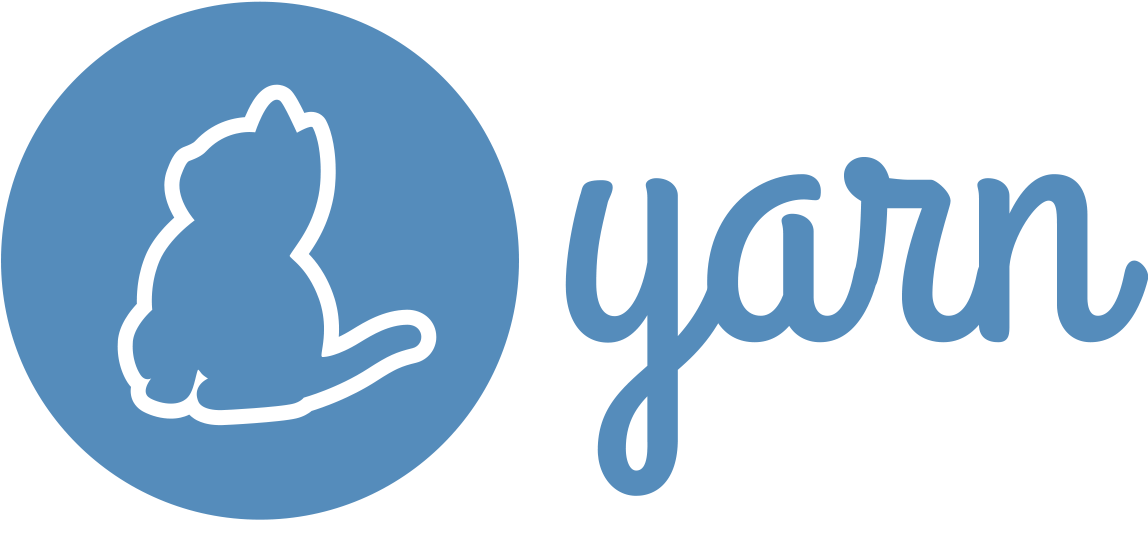
<style>
.page{position:relative;width:1148px;height:555px;background:#ffffff}
.page>*{position:absolute;margin:0}
.t1{font:400px "GrandHotel-Regular";color:#558cbb}
</style>
<div class="page">
<p class="t1" style="left:565px;top:156px;width:584px;height:340px">yarn</p>
</div>
